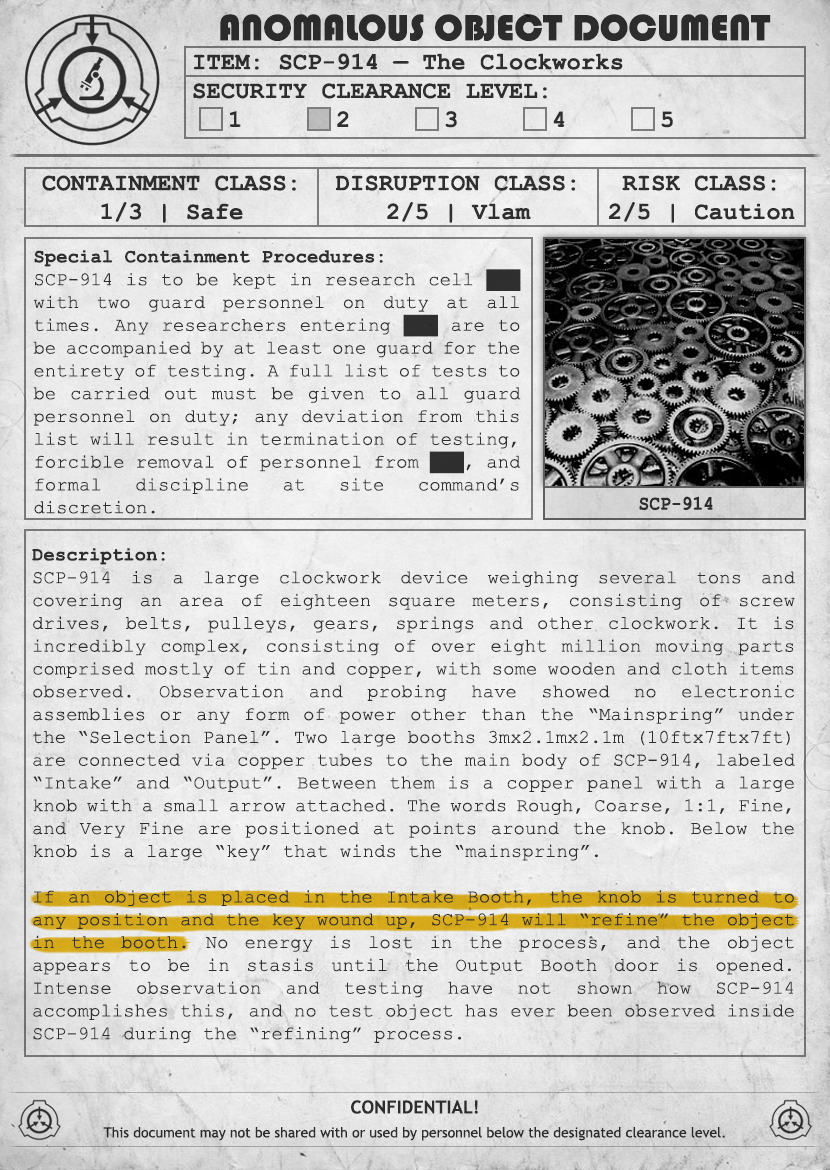
<style>
.page{position:relative;width:830px;height:1170px}
.page>*{position:absolute;margin:0}
.t1{font:38px "Bauhaus93";color:#333333;text-transform:uppercase}
.t2{font:24px "CourierNewPS-BoldMT";color:#333333}
.t3{font:24px "CourierNewPS-BoldMT";color:#333333;text-transform:uppercase}
.t4{font:19px "CourierNewPSMT";color:#333333}
.t5{font:19px "CourierNewPS-BoldMT";color:#333333}
.t6{font:20.1px "CourierNewPS-BoldMT";color:#333333;scale:0.9 1}
.t7{font:14px/24px "TrebuchetMS";color:#333333}
.t8{font:18px/24px "TrebuchetMS-Bold";color:#333333}
</style>
<div class="page">
<p class="t1" style="left:220px;top:14px;width:551px;height:27px">anomalous object document</p>
<p class="t2" style="left:193px;top:53px;width:480px;height:75px">ITEM: SCP-914 — The Clockworks<br><span class="t3">Security CLEARANCE LEVEL:</span> <br> 1   2   3   4   5</p>
<p class="t2" style="left:42px;top:175px;width:254px;height:48px;text-align:center">CONTAINMENT CLASS:<br>1/3 | Safe</p>
<p class="t2" style="left:335px;top:175px;width:241px;height:48px;text-align:center">DISRUPTION CLASS:<br>2/5 | Vlam</p>
<p class="t2" style="left:609px;top:175px;width:186px;height:48px;text-align:center">RISK CLASS:<br>2/5 | Caution</p>
<p class="t4" style="left:33px;top:250px;width:488px;height:264px;text-align:justify"><span class="t5">Special Containment Procedures:<br></span>SCP-914 is to be kept in research cell ███ with two guard personnel on duty at all times. Any researchers entering ███ are to be accompanied by at least one guard for the entirety of testing. A full list of tests to be carried out must be given to all guard personnel on duty; any deviation from this list will result in termination of testing, forcible removal of personnel from ███, and formal discipline at site command’s discretion.</p>
<p class="t6" style="left:639px;top:496px;width:74px;height:15px">SCP-914</p>
<p class="t4" style="left:32px;top:548px;width:763px;height:495px;text-align:justify"><span class="t5">Description:<br></span>SCP-914 is a large clockwork device weighing several tons and covering an area of eighteen square meters, consisting of screw drives, belts, pulleys, gears, springs and other clockwork. It is incredibly complex, consisting of over eight million moving parts comprised mostly of tin and copper, with some wooden and cloth items observed. Observation and probing have showed no electronic assemblies or any form of power other than the “Mainspring” under the “Selection Panel”. Two large booths 3mx2.1mx2.1m (10ftx7ftx7ft) are connected via copper tubes to the main body of SCP-914, labeled “Intake” and “Output”. Between them is a copper panel with a large knob with a small arrow attached. The words Rough, Coarse, 1:1, Fine, and Very Fine are positioned at points around the knob. Below the knob is a large “key” that winds the “mainspring”.<br><br>If an object is placed in the Intake Booth, the knob is turned to any position and the key wound up, SCP-914 will “refine” the object in the booth. No energy is lost in the process, and the object appears to be in stasis until the Output Booth door is opened. Intense observation and testing have not shown how SCP-914 accomplishes this, and no test object has ever been observed inside SCP-914 during the “refining” process.</p>
<p class="t7" style="left:103px;top:1100px;width:622px;height:41px;text-align:center"><span class="t8">CONFIDENTIAL!<br></span>This document may not be shared with or used by personnel below the designated clearance level.</p>
</div>
